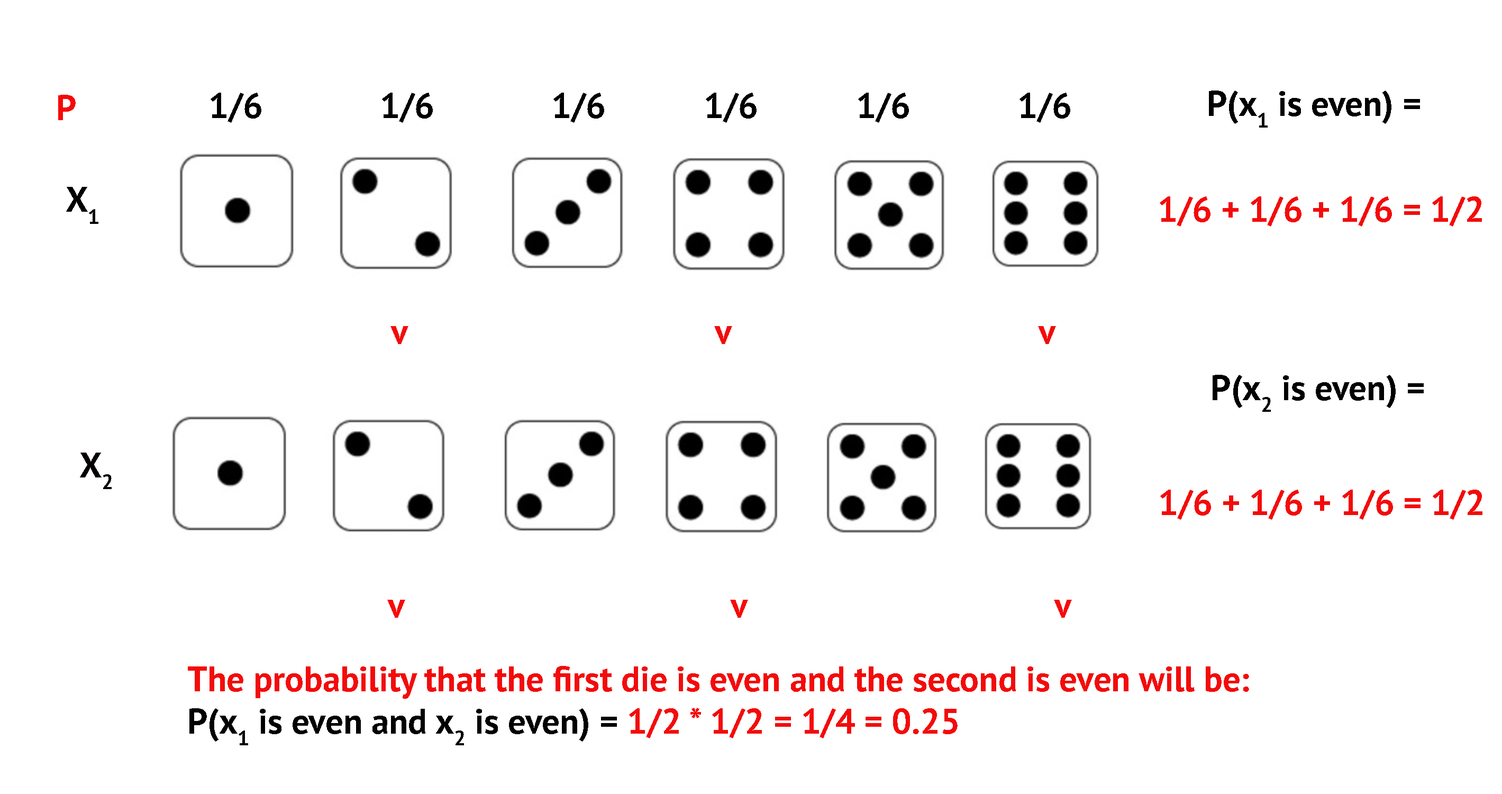
<style>
.page{position:relative;width:1502px;height:794px;background:#ffffff}
.page>*{position:absolute;margin:0}
.t1{font:35.3px "PTSans-Bold";color:#f60808}
.t2{font:35.3px "PTSans-Bold";color:#000000}
.t3{font:35.3px "PTSans-Bold";color:#010101}
.t4{font:35.3px "PTSans-Bold";color:#020000}
.t5{font:35.3px "PTSans-Bold";color:#f30b0b}
.t6{font:35.3px "PTSans-Bold";color:#040000}
.t7{font:35.3px "PTSans-Bold";color:#f60a0a}
</style>
<div class="page">
<p class="t1" style="left:58px;top:95px;width:18px;height:25px">P</p>
<p class="t2" style="left:211px;top:93px;width:859px;height:30px">1/6       1/6       1/6      1/6      1/6       1/6</p>
<p class="t3" style="left:1209px;top:90px;width:211px;height:38px">P(x1 is even) =</p>
<p class="t4" style="left:66px;top:187px;width:32px;height:37px">X1</p>
<p class="t5" style="left:1160px;top:196px;width:322px;height:30px">1/6 + 1/6 + 1/6 = 1/2</p>
<p class="t5" style="left:391px;top:326px;width:665px;height:18px">v                 v                 v</p>
<p class="t3" style="left:1213px;top:375px;width:211px;height:37px">P(x2 is even) =</p>
<p class="t6" style="left:80px;top:452px;width:32px;height:37px">X2</p>
<p class="t5" style="left:1160px;top:489px;width:323px;height:31px">1/6 + 1/6 + 1/6 = 1/2</p>
<p class="t7" style="left:387px;top:600px;width:685px;height:18px">v                  v                  v</p>
<p class="t5" style="left:188px;top:666px;width:1061px;height:79px">The probability that the first die is even and the second is even will be: <br><span class="t3">P(x1 is even and x2 is even) = </span>1/2 * 1/2 = 1/4 = 0.25</p>
</div>
